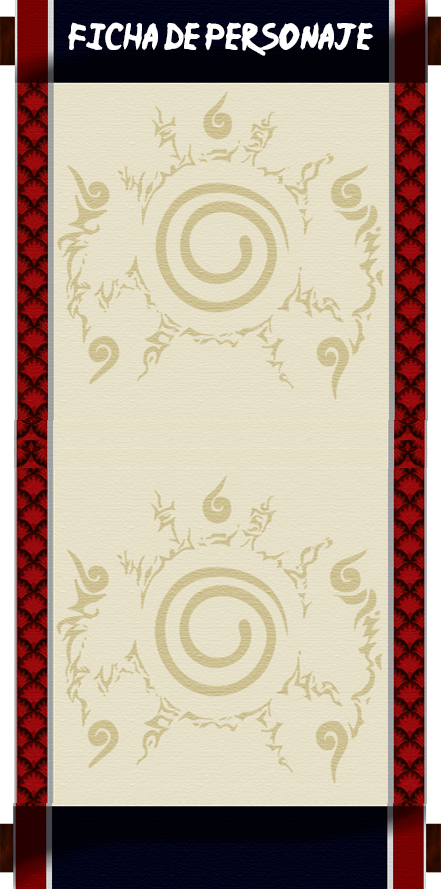
<style>
.page{position:relative;width:441px;height:889px}
.page>*{position:absolute;margin:0}
.t1{font:30.1px "Ninja-Naruto";color:#ffffff}
</style>
<div class="page">
<p class="t1" style="left:68px;top:22px;width:305px;height:34px">FICHA DE PERSONAJE</p>
</div>
